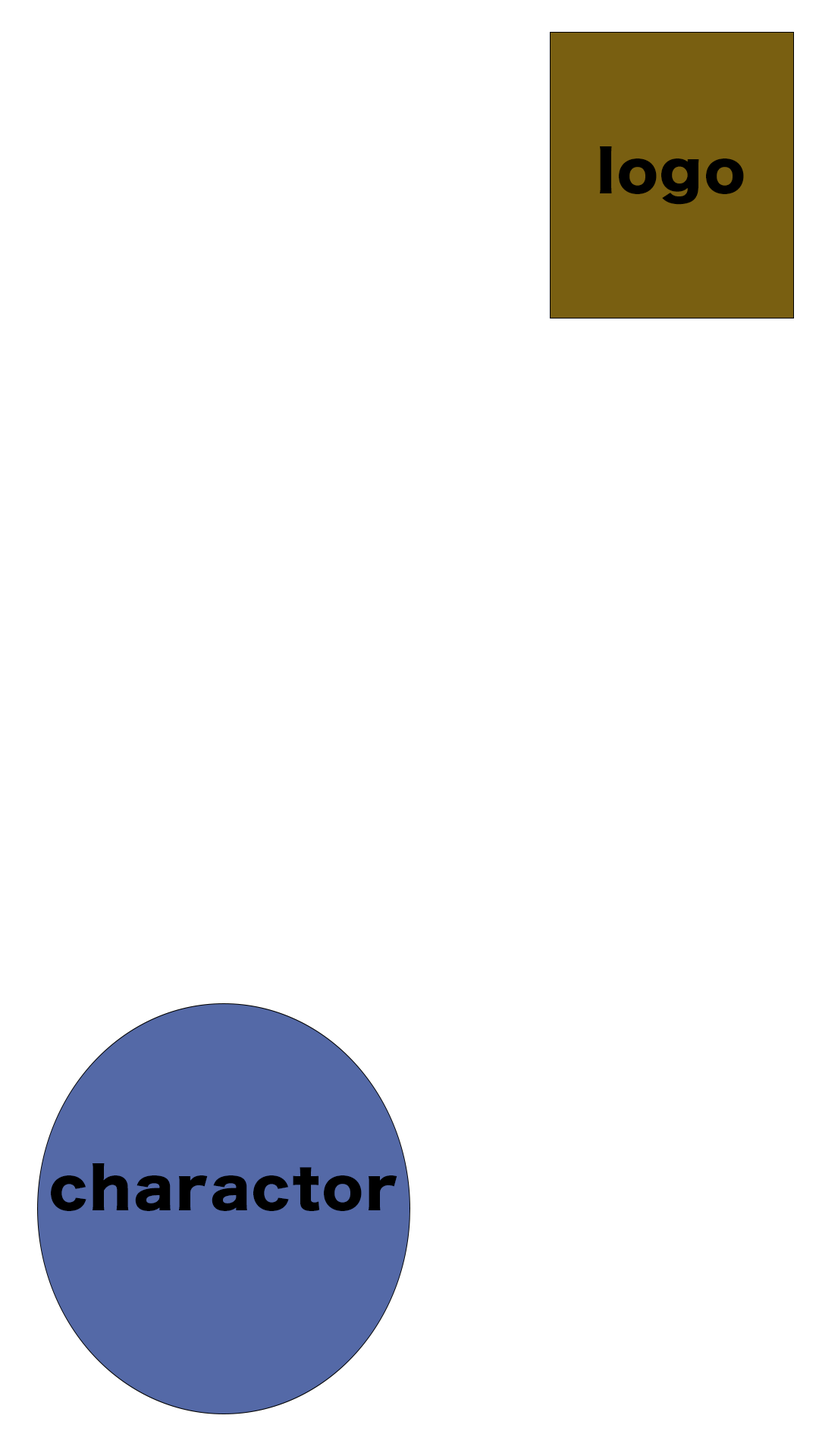
<style>
.page{position:relative;width:819px;height:1456px;background:#ffffff}
.page>*{position:absolute;margin:0}
.t1{font:56.9px "HiraKakuStd-W8";letter-spacing:0.04em;color:#000000}
</style>
<div class="page">
<p class="t1" style="left:600px;top:146px;width:144px;height:59px">logo</p>
<p class="t1" style="left:51px;top:1163px;width:346px;height:48px">charactor</p>
</div>
